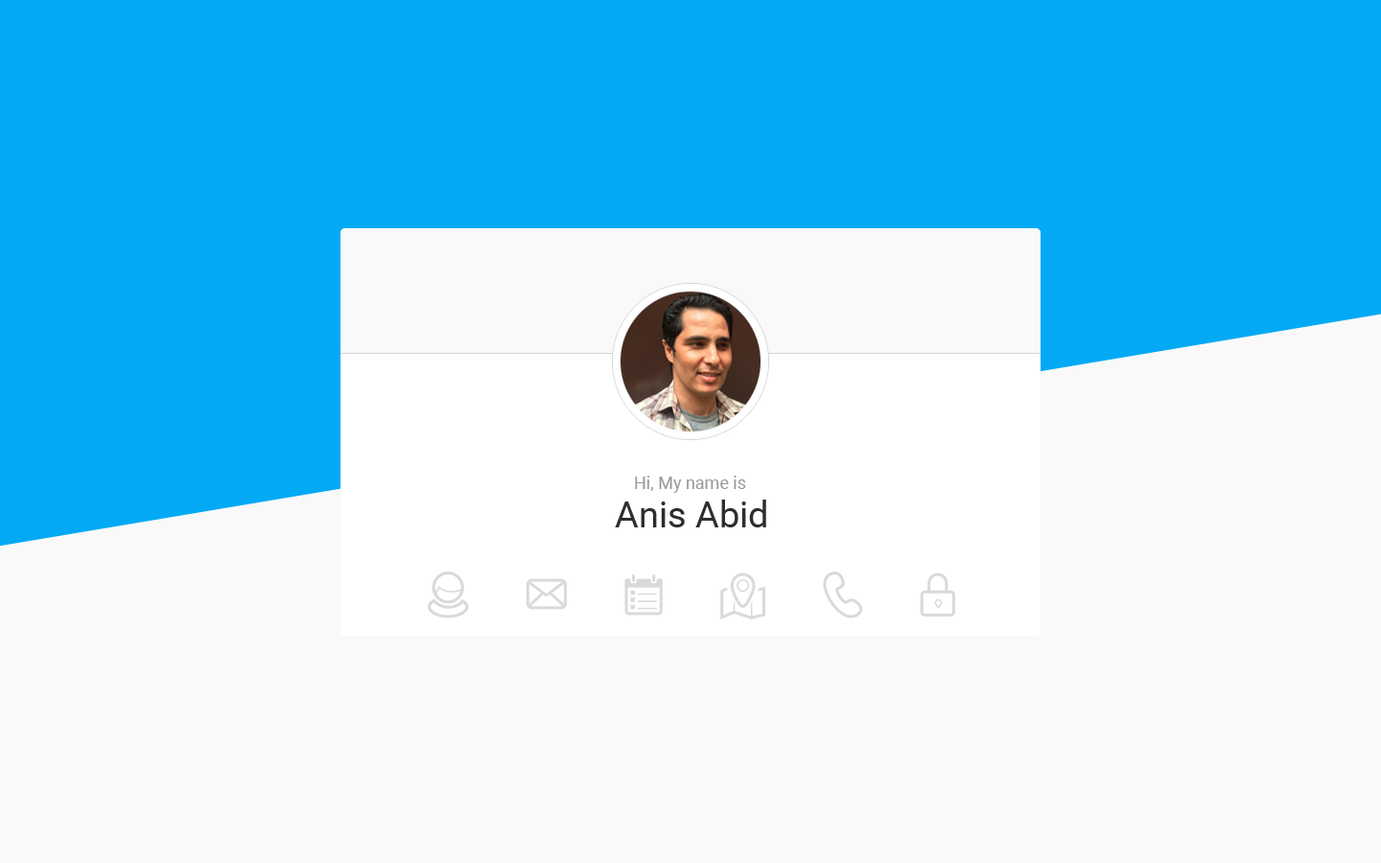
<style>
.page{position:relative;width:1381px;height:863px;background:#f9f9f9}
.page>*{position:absolute;margin:0}
.t1{font:17.3px "Roboto-Regular";color:#999999}
.t2{font:36.5px "Roboto-Regular";color:#2c2e31}
</style>
<div class="page">
<p class="t1" style="left:635px;top:476px;width:111px;height:17px">Hi, My name is</p>
<p class="t2" style="left:615px;top:500px;width:151px;height:28px">Anis Abid</p>
</div>
